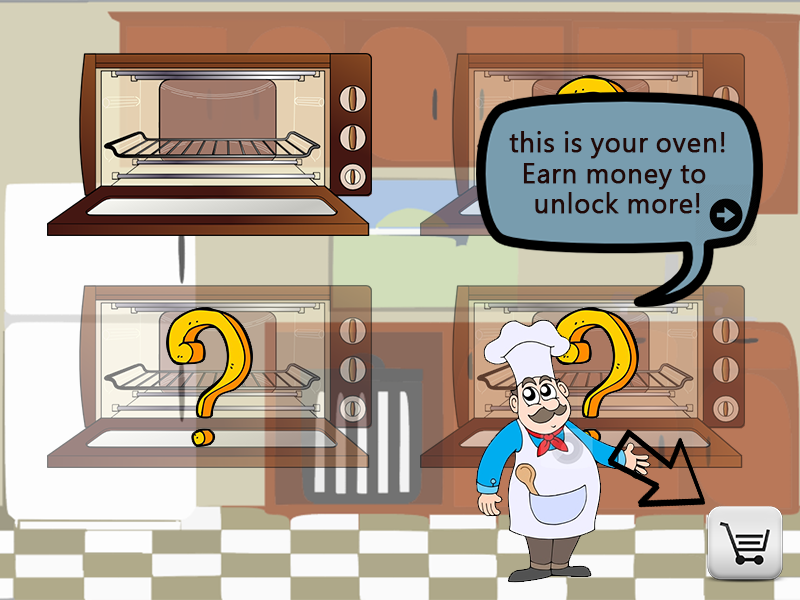
<style>
.page{position:relative;width:800px;height:600px}
.page>*{position:absolute;margin:0}
.t1{font:25.6px "MicrosoftJhengHeiRegular";letter-spacing:0.009em;color:#200907;font-weight:bold}
</style>
<div class="page">
<p class="t1" style="left:509px;top:131px;width:216px;height:83px;text-align:center">this is your oven!<br>Earn money to <br>unlock more!</p>
</div>
